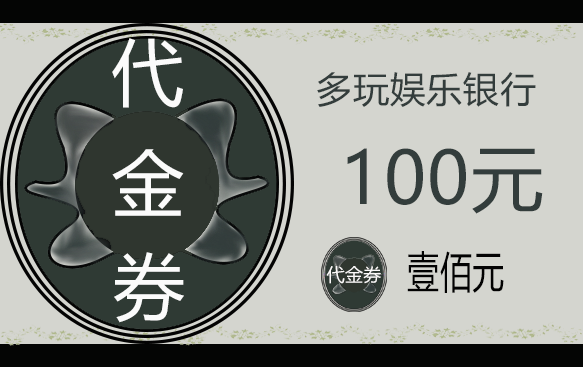
<style>
.page{position:relative;width:583px;height:367px;background:#d4d5cf}
.page>*{position:absolute;margin:0}
.t1{font:72px "MicrosoftYaHei";letter-spacing:0.02em;color:#fbfbfb}
.t2{font:36px "MicrosoftYaHei";letter-spacing:0.02em;color:#333d3c}
.t3{font:72px "MicrosoftYaHei";letter-spacing:0.02em;color:#333d3c}
.t4{font:43.1px "MicrosoftYaHei";letter-spacing:0.02em;color:#020202;scale:0.74 1}
.t5{font:18px "MicrosoftYaHei";letter-spacing:0.02em;color:#fcfafa}
</style>
<div class="page">
<p class="t1" style="left:112px;top:38px;width:71px;height:70px">代</p>
<p class="t2" style="left:317px;top:72px;width:219px;height:35px">多玩娱乐银行</p>
<p class="t1" style="left:112px;top:149px;width:72px;height:67px">金</p>
<p class="t3" style="left:347px;top:148px;width:196px;height:66px">100元</p>
<p class="t1" style="left:114px;top:252px;width:70px;height:71px">券</p>
<p class="t4" style="left:407px;top:251px;width:97px;height:42px">壹佰元</p>
<p class="t5" style="left:326px;top:266px;width:55px;height:18px">代金券</p>
</div>
